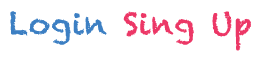
<style>
.page{position:relative;width:256px;height:57px;background:#ffffff}
.page>*{position:absolute;margin:0}
.t1{font:30px "Chalkduster";letter-spacing:0.025em;color:#ec3766}
.t2{font:30px "Chalkduster";letter-spacing:0.025em;color:#3c7fc3}
</style>
<div class="page">
<p class="t1" style="left:10px;top:11px;width:241px;height:40px"><span class="t2">Login</span> Sing Up</p>
</div>
